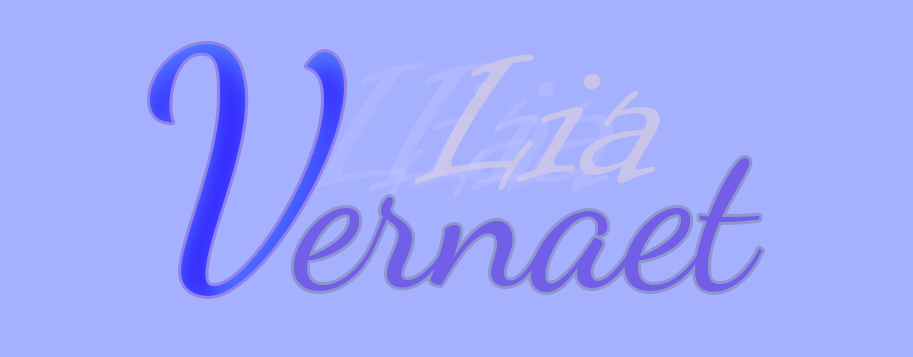
<style>
.page{position:relative;width:913px;height:357px;background:#a5b1ff}
.page>*{position:absolute;margin:0}
.t1{font:312.5px "DancingScriptOT";color:#3e44ff}
.t2{font:208.3px "InformalRoman-Regular";color:#c8c3e9}
.t3{font:208.3px "InformalRoman-Regular";color:#afb7ff}
.t4{font:208.3px "DancingScriptOT";color:#725ee7}
</style>
<div class="page">
<p class="t1" style="left:149px;top:44px;width:195px;height:252px">V</p>
<p class="t2" style="left:414px;top:54px;width:246px;height:136px">Lia</p>
<p class="t3" style="left:368px;top:62px;width:246px;height:136px">Lia</p>
<p class="t4" style="left:293px;top:158px;width:469px;height:134px">ernaet</p>
</div>
